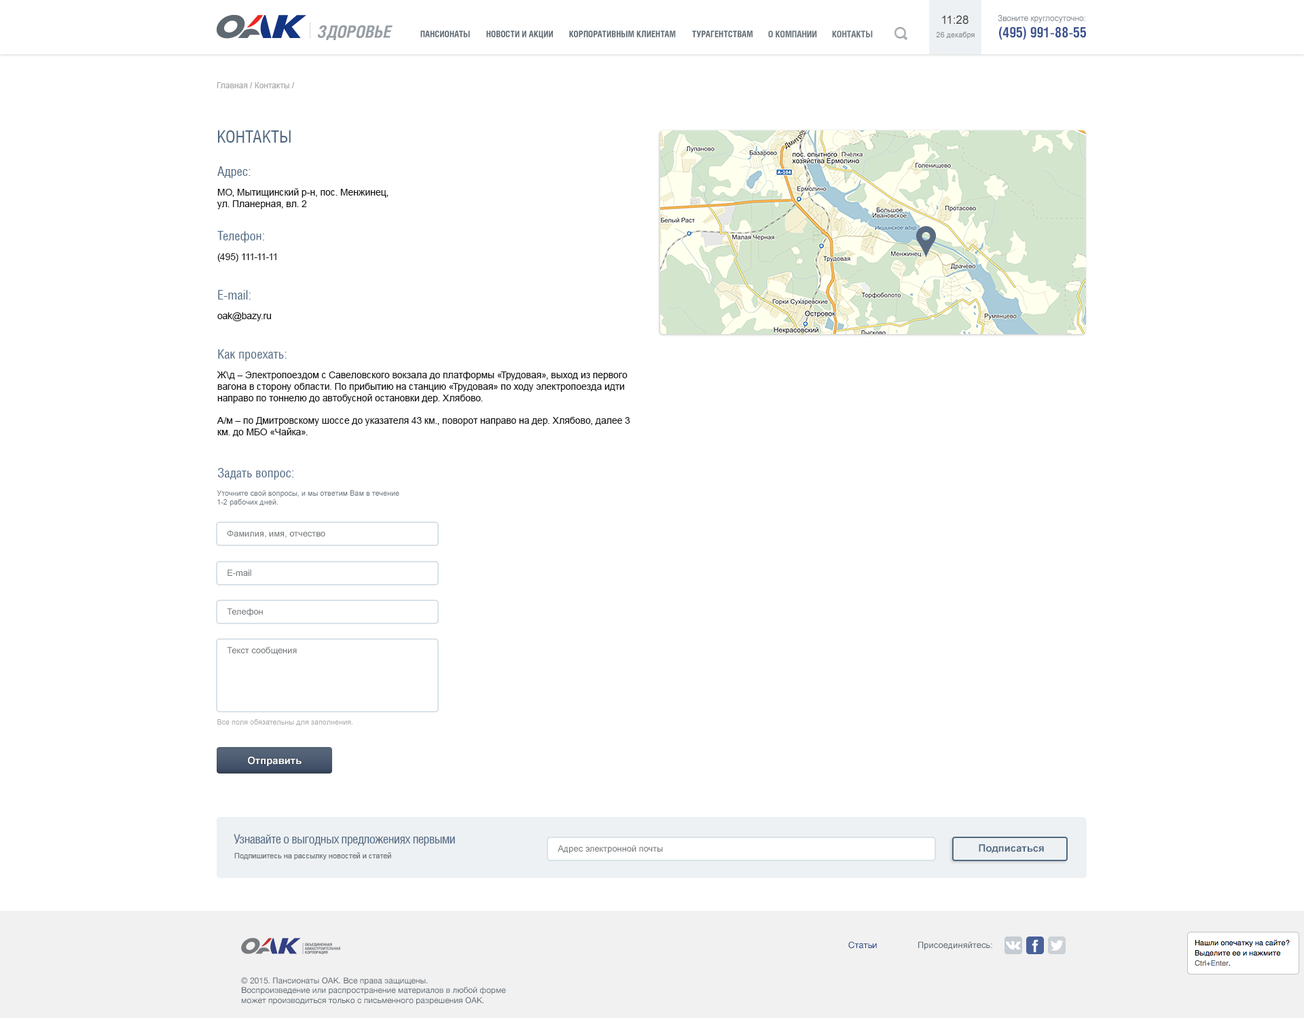
<style>
.page{position:relative;width:1304px;height:1018px;background:#ffffff}
.page>*{position:absolute;margin:0}
.t1{font:11.5px "ArialMT";letter-spacing:-0.005em;color:#3b3c3c}
.t2{font:8.2px "ArialMT";letter-spacing:-0.005em;color:#7c858b}
.t3{font:17px "HeliosCond-Bold-Italic";color:#979da3}
.t4{font:14.3px "HeliosCondBold";letter-spacing:-0.005em;color:#3d5390;text-transform:uppercase}
.t5{font:8.8px "HeliosCond-Bold";color:#5f6971}
.t6{font:9.2px "HeliosCond-Bold";letter-spacing:-0.005em;color:#697379;text-transform:uppercase}
.t7{font:7.5px "ArialMT";letter-spacing:-0.005em;color:#6a747c}
.t8{font:8.2px "ArialMT";color:#a9a9a9}
.t9{font:17px "HeliosCond";color:#506982;text-transform:uppercase}
.t10{font:12.9px "HeliosCond";letter-spacing:-0.005em;color:#506982}
.t11{font:9.5px "ArialMT";letter-spacing:-0.01em;color:#151515}
.t12{font:8.8px "ArialMT";letter-spacing:-0.005em;color:#73777a}
.t13{font:7.5px "ArialMT";letter-spacing:-0.005em;color:#a9a9a9}
.t14{font:10.2px "Arial-BoldMT";letter-spacing:-0.005em;color:#ffffff}
.t15{font:12.9px "HeliosCond";letter-spacing:-0.04em;color:#506982}
.t16{font:10.2px "Arial-BoldMT";letter-spacing:-0.005em;color:#506982}
.t17{font:7.5px "ArialMT";letter-spacing:-0.01em;color:#6a747c}
.t18{font:8.8px "HelveticaNeue";color:#143682}
.t19{font:8.8px "ArialMT";color:#5f6971}
.t20{font:8.2px "HelveticaNeue";color:#5f6971}
</style>
<div class="page">
<p class="t1" style="left:942px;top:15px;width:27px;height:9px">11:28</p>
<p class="t2" style="left:998px;top:15px;width:87px;height:8px">Звоните круглосуточно:</p>
<p class="t3" style="left:318px;top:25px;width:75px;height:15px">ЗДОРОВЬЕ</p>
<p class="t4" style="left:999px;top:26px;width:87px;height:14px">(495) 991-88-55</p>
<p class="t5" style="left:420px;top:31px;width:50px;height:6px">ПАНСИОНАТЫ</p>
<p class="t5" style="left:486px;top:31px;width:67px;height:8px">НОВОСТИ И АКЦИИ</p>
<p class="t5" style="left:569px;top:31px;width:107px;height:6px">КОРПОРАТИВНЫМ КЛИЕНТАМ</p>
<p class="t5" style="left:692px;top:31px;width:61px;height:6px">ТУРАГЕНТСТВАМ</p>
<p class="t6" style="left:768px;top:31px;width:49px;height:6px">О КОМПАНИИ</p>
<p class="t6" style="left:832px;top:31px;width:41px;height:6px">КОНТАКТЫ</p>
<p class="t7" style="left:936px;top:31px;width:39px;height:8px">26 декабря</p>
<p class="t8" style="left:217px;top:82px;width:78px;height:6px">Главная / Контакты /</p>
<p class="t9" style="left:217px;top:130px;width:74px;height:13px">Контакты</p>
<p class="t10" style="left:217px;top:166px;width:34px;height:13px">Адрес:</p>
<p class="t11" style="left:217px;top:188px;width:172px;height:21px">МО, Мытищинский р-н, пос. Менжинец, <br>ул. Планерная, вл. 2</p>
<p class="t10" style="left:217px;top:231px;width:47px;height:12px">Телефон:</p>
<p class="t11" style="left:217px;top:253px;width:59px;height:9px">(495) 111-11-11</p>
<p class="t10" style="left:218px;top:290px;width:33px;height:10px">E-mail:</p>
<p class="t11" style="left:217px;top:312px;width:54px;height:9px">oak@bazy.ru</p>
<p class="t10" style="left:218px;top:349px;width:69px;height:12px">Как проехать:</p>
<p class="t11" style="left:217px;top:372px;width:413px;height:65px">Ж\д – Электропоездом с Савеловского вокзала до платформы «Трудовая», выход из первого вагона в сторону области. По прибытию на станцию «Трудовая» по ходу электропоезда идти направо по тоннелю до автобусной остановки дер. Хлябово.<br><br>А/м – по Дмитровскому шоссе до указателя 43 км., поворот направо на дер. Хлябово, далее 3 км. до МБО «Чайка».</p>
<p class="t10" style="left:218px;top:468px;width:75px;height:12px">Задать вопрос:</p>
<p class="t7" style="left:217px;top:490px;width:182px;height:17px">Уточните свой вопросы, и мы ответим Вам в течение <br>1-2 рабочих дней.</p>
<p class="t12" style="left:227px;top:530px;width:98px;height:8px">Фамилия, имя, отчество</p>
<p class="t12" style="left:228px;top:569px;width:23px;height:7px">E-mail</p>
<p class="t12" style="left:227px;top:608px;width:36px;height:9px">Телефон</p>
<p class="t12" style="left:227px;top:647px;width:70px;height:8px">Текст сообщения</p>
<p class="t13" style="left:217px;top:719px;width:136px;height:7px">Все поля обязательны для заполнения.</p>
<p class="t14" style="left:248px;top:757px;width:54px;height:9px">Отправить</p>
<p class="t15" style="left:234px;top:834px;width:221px;height:12px">Узнавайте о выгодных предложениях первыми</p>
<p class="t12" style="left:558px;top:845px;width:105px;height:9px">Адрес электронной почты</p>
<p class="t16" style="left:979px;top:844px;width:65px;height:9px">Подписаться</p>
<p class="t17" style="left:234px;top:852px;width:157px;height:8px">Подпишитесь на рассылку новостей и статей</p>
<p class="t18" style="left:848px;top:941px;width:29px;height:8px">Статьи</p>
<p class="t19" style="left:918px;top:941px;width:74px;height:9px">Присоединяйтесь:</p>
<p class="t20" style="left:241px;top:977px;width:265px;height:28px">© 2015. Пансионаты ОАК. Все права защищены.<br>Воспроизведение или распространение материалов в любой форме <br>может производиться только с письменного разрешения ОАК.</p>
</div>
